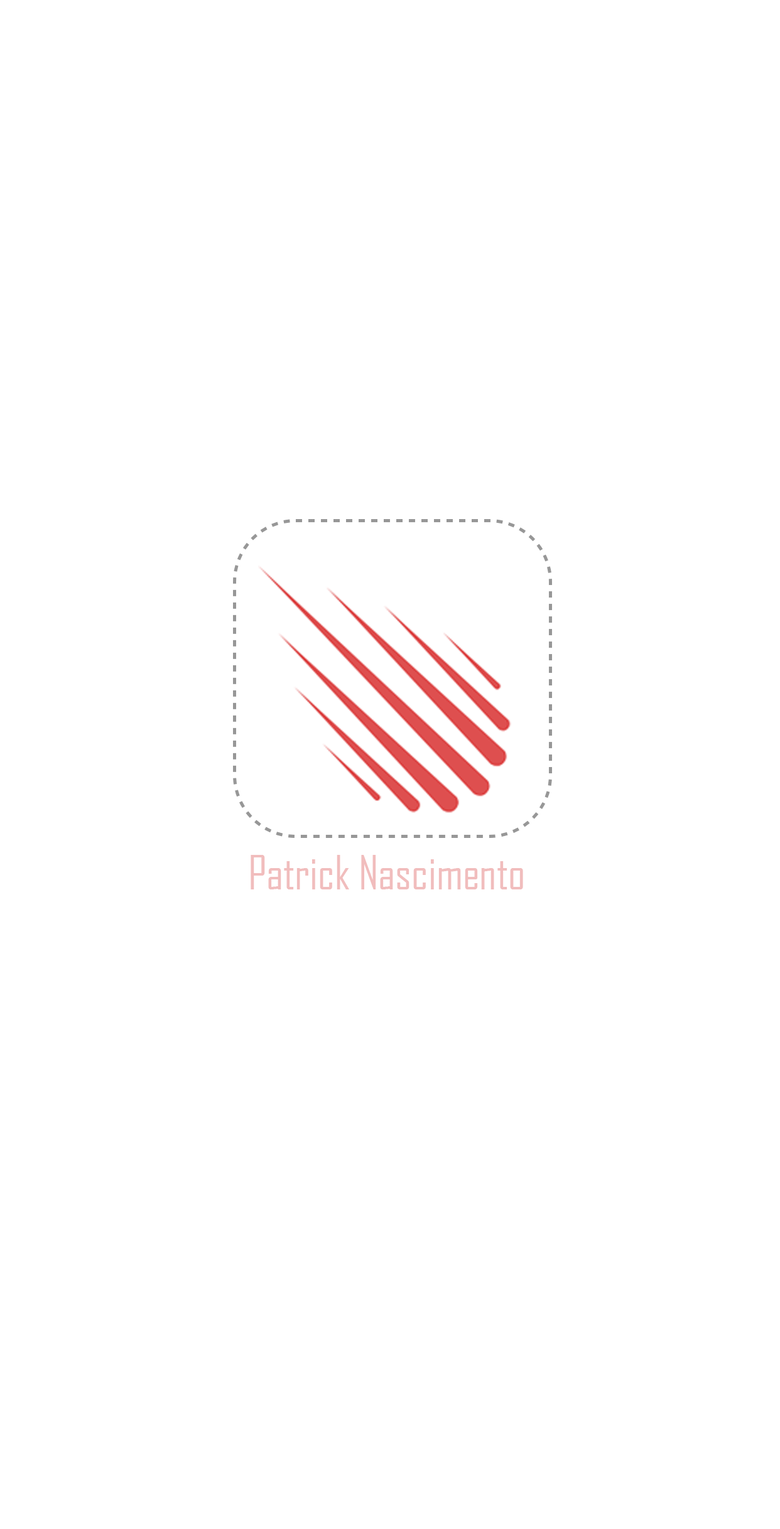
<style>
.page{position:relative;width:780px;height:1529px;background:#ffffff}
.page>*{position:absolute;margin:0}
.t1{font:45.2px "AgencyFB-Reg";color:#f1bdbd}
</style>
<div class="page">
<p class="t1" style="left:250px;top:855px;width:273px;height:35px">Patrick Nascimento</p>
</div>
